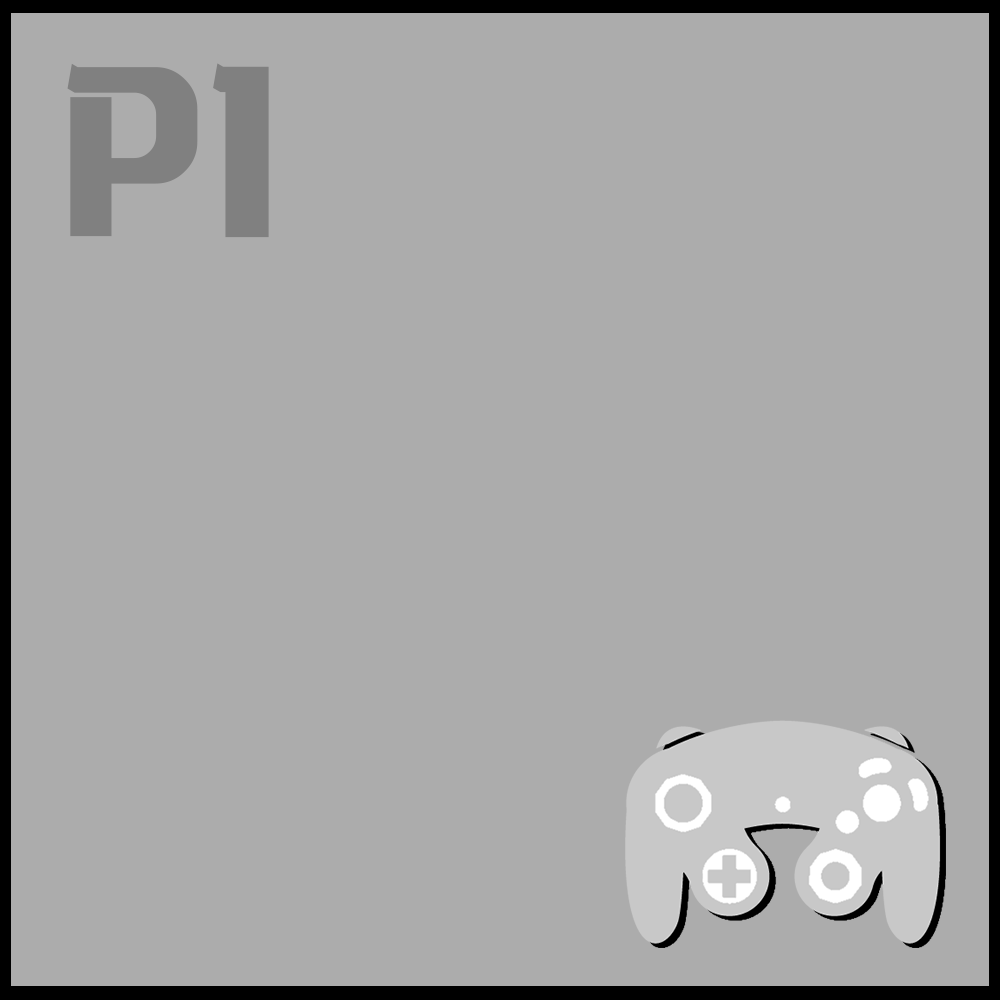
<style>
.page{position:relative;width:1000px;height:1000px;background:#acacac}
.page>*{position:absolute;margin:0}
.t1{font:196px "BenmoJinhei";color:#808080}
</style>
<div class="page">
<p class="t1" style="left:67px;top:63px;width:202px;height:175px">P1</p>
</div>
